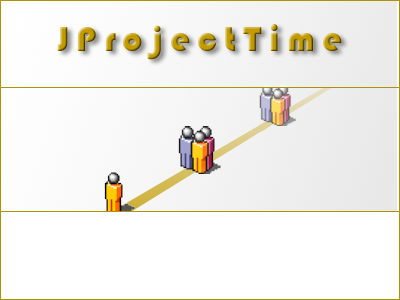
<style>
.page{position:relative;width:400px;height:300px;background:#ffffff}
.page>*{position:absolute;margin:0}
.t1{font:36px "Bauhaus93";letter-spacing:0.2em}
</style>
<div class="page">
<p class="t1" style="left:57px;top:24px;width:285px;height:36px">JProjectTime</p>
</div>
